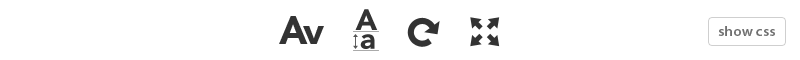
<style>
.page{position:relative;width:800px;height:60px;background:#ffffff}
.page>*{position:absolute;margin:0}
.t1{font:38.2px "AvenirLTStd-Black";color:#333333}
.t2{font:29.1px "AvenirLTStd-Black";color:#333333}
.t3{font:14px "MyriadPro-SemiboldSemiExt";color:#6f6f6f}
</style>
<div class="page">
<p class="t1" style="left:279px;top:16px;width:45px;height:28px">Av</p>
<p class="t2" style="left:355px;top:9px;width:23px;height:21px">A</p>
<p class="t3" style="left:718px;top:26px;width:57px;height:10px">show css</p>
<p class="t2" style="left:360px;top:34px;width:15px;height:15px">a</p>
</div>
